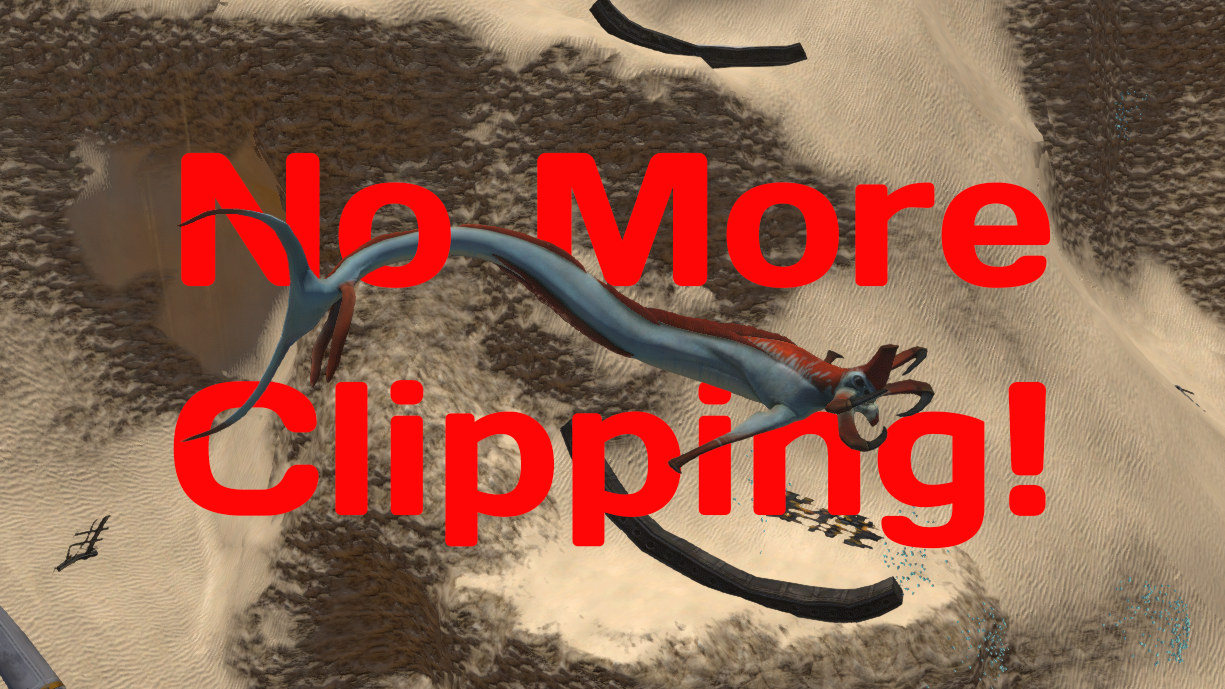
<style>
.page{position:relative;width:1225px;height:689px}
.page>*{position:absolute;margin:0}
.t1{font:190.5px "DaysOne-Regular";color:#ff0606}
</style>
<div class="page">
<p class="t1" style="left:173px;top:152px;width:878px;height:397px">No More <br>Clipping!</p>
</div>
